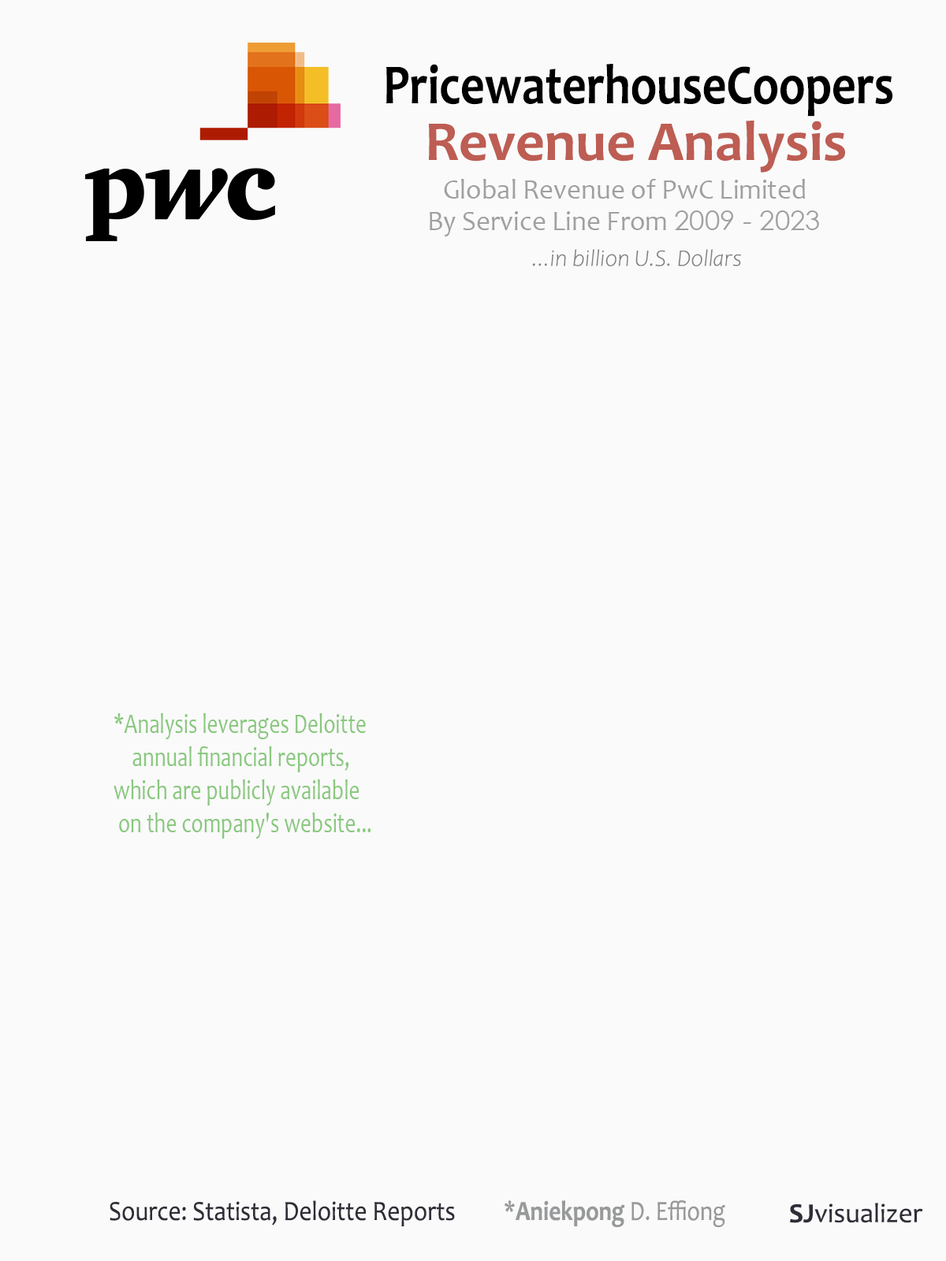
<style>
.page{position:relative;width:946px;height:1261px;background:#fafafa}
.page>*{position:absolute;margin:0}
.t1{font:56.7px "Candara-Bold";color:#000000;scale:0.83 1}
.t2{font:56.7px "Candara-Bold";color:#bd5d53}
.t3{font:27.6px "Candara";color:#9fa0a1}
.t4{font:27.6px "CenturyGothic";color:#9fa0a1}
.t5{font:23.6px "Candara-LightItalic";color:#6d6f71}
.t6{font:27.6px "Candara";color:#89c87e;scale:0.78 1}
.t7{font:27.6px "Candara-Bold";color:#89c87e;scale:0.78 1}
.t8{font:27.9px "Candara";color:#2e2e38;scale:0.89 1}
.t9{font:27.9px "Candara";color:#98999a;scale:0.84 1}
.t10{font:27.9px "Candara-Bold";color:#98999a;scale:0.84 1}
.t11{font:27.6px "Candara";color:#2e2e38}
.t12{font:27.6px "Candara-Bold";color:#2e2e38}
</style>
<div class="page">
<p class="t1" style="left:386px;top:64px;width:507px;height:53px">PricewaterhouseCoopers</p>
<p class="t2" style="left:429px;top:121px;width:416px;height:52px">Revenue Analysis</p>
<p class="t3" style="left:444px;top:179px;width:361px;height:20px">Global Revenue of PwC Limited</p>
<p class="t3" style="left:429px;top:210px;width:390px;height:26px">By Service Line From <span class="t4">2009 - 2023</span></p>
<p class="t5" style="left:532px;top:249px;width:209px;height:17px">...in billion U.S. Dollars</p>
<p class="t6" style="left:113px;top:713px;width:258px;height:126px"><span class="t7">*</span>Analysis leverages Deloitte<br>    annual financial reports,<br>which are publicly available<br> on the company's website...</p>
<p class="t8" style="left:110px;top:1200px;width:345px;height:26px">Source: Statista, Deloitte Reports</p>
<p class="t9" style="left:504px;top:1200px;width:221px;height:27px">*<span class="t10">Aniekpong</span> D. Effiong</p>
<p class="t11" style="left:790px;top:1203px;width:133px;height:20px"><span class="t12">SJ</span>visualizer</p>
</div>
